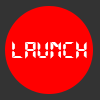
<style>
.page{position:relative;width:100px;height:100px;background:#ff0000}
.page>*{position:absolute;margin:0}
.t1{font:24.9px "DS-Digital-Bold";color:#ffffff}
</style>
<div class="page">
<p class="t1" style="left:12px;top:41px;width:75px;height:18px">LAUNCH</p>
</div>
